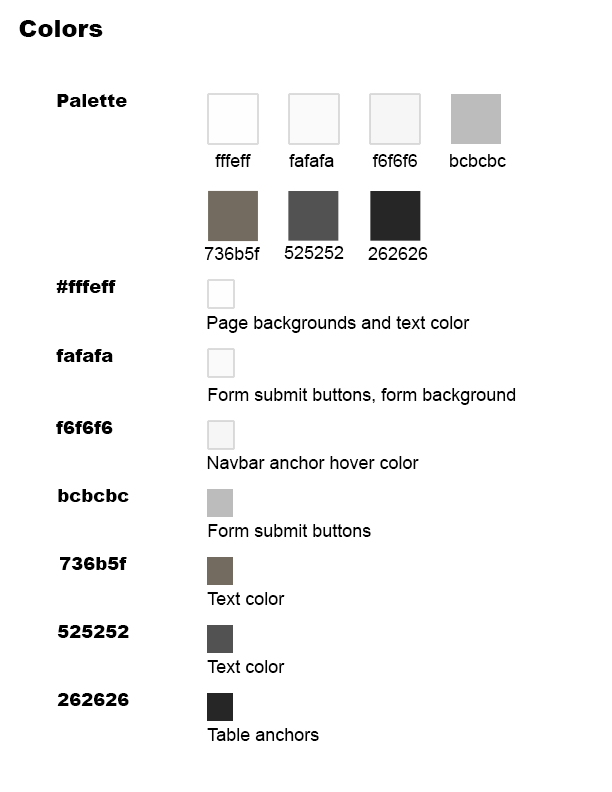
<style>
.page{position:relative;width:612px;height:792px;background:#ffffff}
.page>*{position:absolute;margin:0}
.t1{font:24px "Arial-Black";color:#000000}
.t2{font:18px "Arial-Black";color:#000000}
.t3{font:18px "ArialMT";color:#000000}
.t4{font:17.9px "ArialMT";color:#000000}
</style>
<div class="page">
<p class="t1" style="left:19px;top:20px;width:84px;height:17px">Colors</p>
<p class="t2" style="left:57px;top:94px;width:70px;height:13px">Palette</p>
<p class="t3" style="left:215px;top:154px;width:36px;height:13px">fffeff</p>
<p class="t3" style="left:289px;top:154px;width:45px;height:13px">fafafa</p>
<p class="t3" style="left:372px;top:154px;width:45px;height:13px">f6f6f6</p>
<p class="t3" style="left:450px;top:154px;width:56px;height:13px">bcbcbc</p>
<p class="t4" style="left:284px;top:246px;width:60px;height:13px">525252</p>
<p class="t3" style="left:204px;top:247px;width:56px;height:13px">736b5f</p>
<p class="t4" style="left:368px;top:247px;width:60px;height:13px">262626</p>
<p class="t2" style="left:56px;top:280px;width:60px;height:13px">#fffeff</p>
<p class="t3" style="left:207px;top:316px;width:263px;height:17px">Page backgrounds and text color</p>
<p class="t2" style="left:56px;top:349px;width:57px;height:13px">fafafa</p>
<p class="t3" style="left:208px;top:388px;width:308px;height:17px">Form submit buttons, form background</p>
<p class="t2" style="left:56px;top:421px;width:57px;height:13px">f6f6f6</p>
<p class="t3" style="left:207px;top:456px;width:212px;height:13px">Navbar anchor hover color</p>
<p class="t2" style="left:58px;top:489px;width:71px;height:13px">bcbcbc</p>
<p class="t3" style="left:208px;top:524px;width:163px;height:13px">Form submit buttons</p>
<p class="t2" style="left:60px;top:557px;width:67px;height:13px">736b5f</p>
<p class="t3" style="left:207px;top:592px;width:78px;height:13px">Text color</p>
<p class="t2" style="left:57px;top:625px;width:72px;height:13px">525252</p>
<p class="t3" style="left:207px;top:660px;width:78px;height:13px">Text color</p>
<p class="t2" style="left:57px;top:693px;width:72px;height:13px">262626</p>
<p class="t3" style="left:207px;top:728px;width:112px;height:13px">Table anchors</p>
</div>
